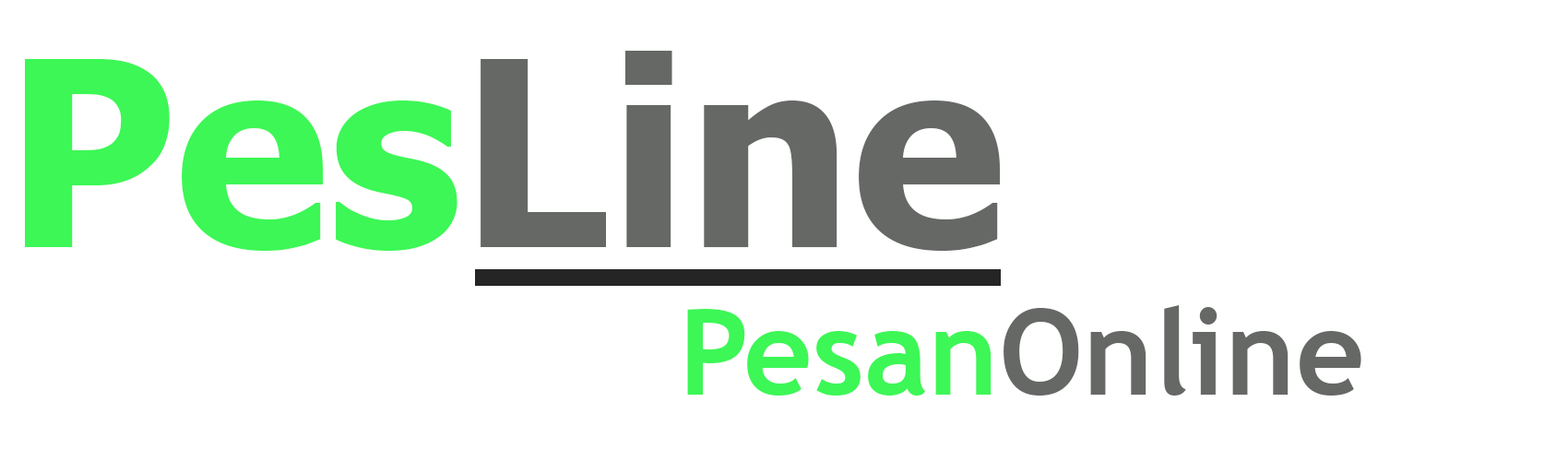
<style>
.page{position:relative;width:1568px;height:461px;background:#ffffff}
.page>*{position:absolute;margin:0}
.t1{font:258.3px "Tahoma-Bold";color:#656865}
.t2{font:258.3px "Tahoma-Bold";color:#3cf756}
.t3{font:119.9px "TrebuchetMS-Bold";color:#656865}
.t4{font:119.9px "TrebuchetMS-Bold";color:#3cf756}
</style>
<div class="page">
<p class="t1" style="left:25px;top:51px;width:975px;height:200px"><span class="t2">Pes</span>Line</p>
<p class="t3" style="left:687px;top:305px;width:674px;height:91px"><span class="t4">Pesan</span>Online</p>
</div>
